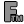
<style>
.page{position:relative;width:24px;height:24px;background:#ffffff}
.page>*{position:absolute;margin:0}
.t1{font:27px "OpenSans-Extrabold";color:#8f8f8f}
.t2{font:7.5px "OpenSans-Extrabold";color:#8f8f8f}
</style>
<div class="page">
<p class="t1" style="left:5px;top:2px;width:12px;height:20px">F</p>
<p class="t2" style="left:11px;top:15px;width:12px;height:6px">TM</p>
</div>
